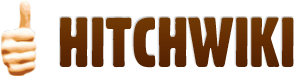
<style>
.page{position:relative;width:294px;height:76px;background:#ffffff}
.page>*{position:absolute;margin:0}
.t1{font:68.6px "Gothic821CondensedBT-Regular";color:#632b02;text-transform:uppercase}
</style>
<div class="page">
<p class="t1" style="left:60px;top:17px;width:234px;height:51px">Hitchwiki</p>
</div>
